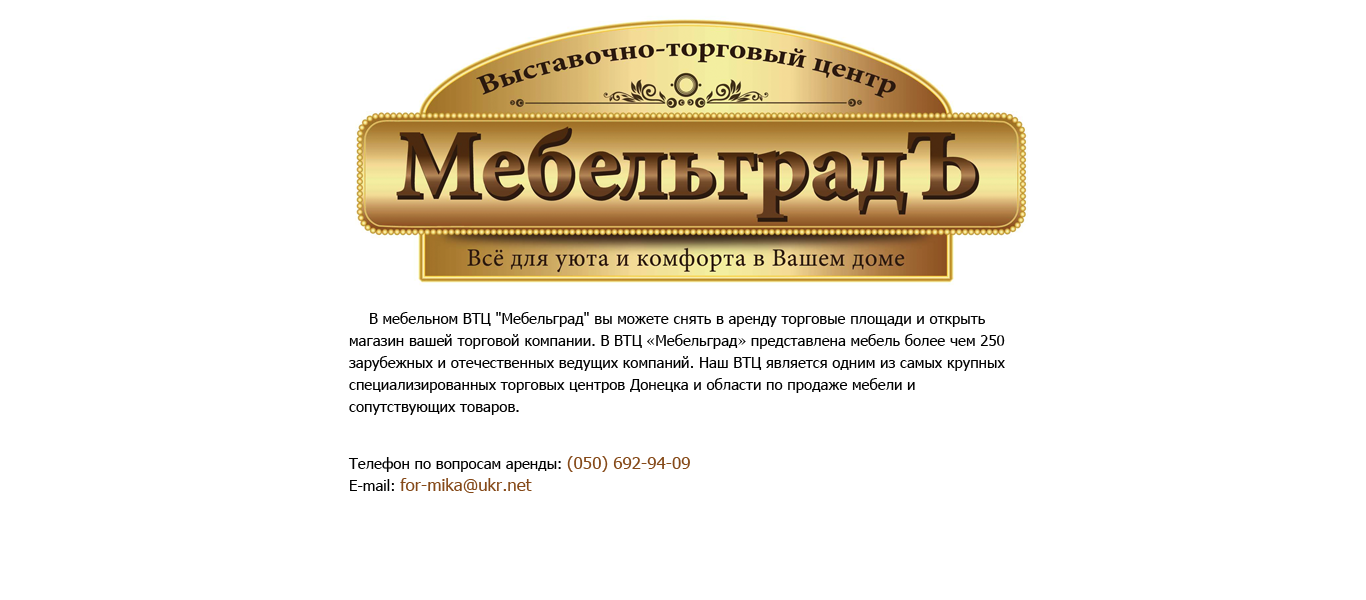
<style>
.page{position:relative;width:1366px;height:600px;background:#ffffff}
.page>*{position:absolute;margin:0}
.t1{font:15px/22px "Tahoma";color:#000000}
.t2{font:17px/22px "Tahoma";color:#854918}
</style>
<div class="page">
<p class="t1" style="left:349px;top:312px;width:656px;height:103px">В мебельном ВТЦ "Мебельград" вы можете снять в аренду торговые площади и открыть магазин вашей торговой компании. В ВТЦ «Мебельград» представлена мебель более чем 250 зарубежных и отечественных ведущих компаний. Наш ВТЦ является одним из самых крупных специализированных торговых центров Донецка и области по продаже мебели и сопутствующих товаров.</p>
<p class="t1" style="left:348px;top:456px;width:342px;height:37px">Телефон по вопросам аренды: <span class="t2">(050) 692-94-09 <br></span>E-mail: <span class="t2">for-mika@ukr.net</span></p>
</div>
